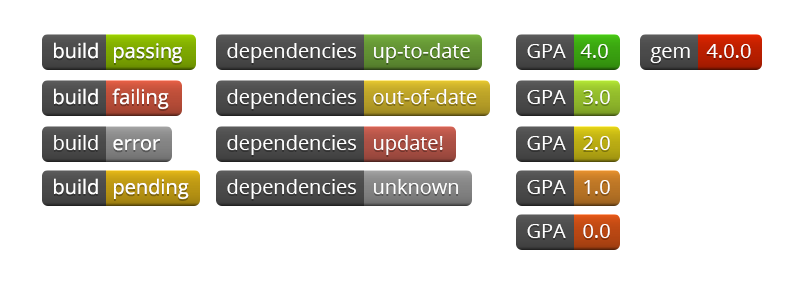
<style>
.page{position:relative;width:800px;height:286px;background:#ffffff}
.page>*{position:absolute;margin:0}
.t1{font:20px "OpenSans";color:#ffffff}
</style>
<div class="page">
<p class="t1" style="left:54px;top:42px;width:44px;height:17px">build</p>
<p class="t1" style="left:114px;top:43px;width:68px;height:20px">passing</p>
<p class="t1" style="left:227px;top:43px;width:129px;height:20px">dependencies</p>
<p class="t1" style="left:374px;top:43px;width:96px;height:20px">up-to-date</p>
<p class="t1" style="left:527px;top:44px;width:39px;height:14px">GPA</p>
<p class="t1" style="left:580px;top:44px;width:28px;height:14px">4.0</p>
<p class="t1" style="left:650px;top:47px;width:40px;height:16px">gem</p>
<p class="t1" style="left:706px;top:44px;width:45px;height:14px">4.0.0</p>
<p class="t1" style="left:54px;top:88px;width:44px;height:17px">build</p>
<p class="t1" style="left:112px;top:88px;width:57px;height:21px">failing</p>
<p class="t1" style="left:227px;top:89px;width:129px;height:20px">dependencies</p>
<p class="t1" style="left:373px;top:89px;width:104px;height:15px">out-of-date</p>
<p class="t1" style="left:527px;top:90px;width:39px;height:14px">GPA</p>
<p class="t1" style="left:583px;top:90px;width:27px;height:14px">3.0</p>
<p class="t1" style="left:54px;top:135px;width:44px;height:15px">build</p>
<p class="t1" style="left:227px;top:135px;width:129px;height:20px">dependencies</p>
<p class="t1" style="left:374px;top:135px;width:69px;height:20px">update!</p>
<p class="t1" style="left:527px;top:136px;width:39px;height:14px">GPA</p>
<p class="t1" style="left:583px;top:136px;width:27px;height:14px">2.0</p>
<p class="t1" style="left:113px;top:139px;width:47px;height:12px">error</p>
<p class="t1" style="left:54px;top:178px;width:44px;height:17px">build</p>
<p class="t1" style="left:114px;top:178px;width:75px;height:21px">pending</p>
<p class="t1" style="left:227px;top:179px;width:129px;height:20px">dependencies</p>
<p class="t1" style="left:374px;top:179px;width:84px;height:15px">unknown</p>
<p class="t1" style="left:527px;top:180px;width:39px;height:14px">GPA</p>
<p class="t1" style="left:584px;top:180px;width:26px;height:14px">1.0</p>
<p class="t1" style="left:527px;top:224px;width:39px;height:14px">GPA</p>
<p class="t1" style="left:583px;top:224px;width:27px;height:14px">0.0</p>
</div>
